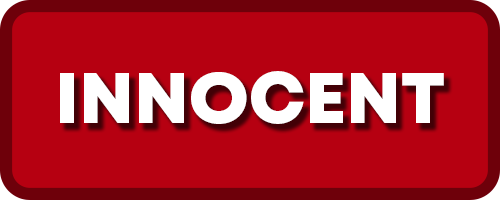
<style>
.page{position:relative;width:500px;height:200px;background:#b60011}
.page>*{position:absolute;margin:0}
.t1{font:72px "Mont-HeavyDEMO";color:#ffffff}
</style>
<div class="page">
<p class="t1" style="left:60px;top:71px;width:384px;height:53px">INNOCENT</p>
</div>
